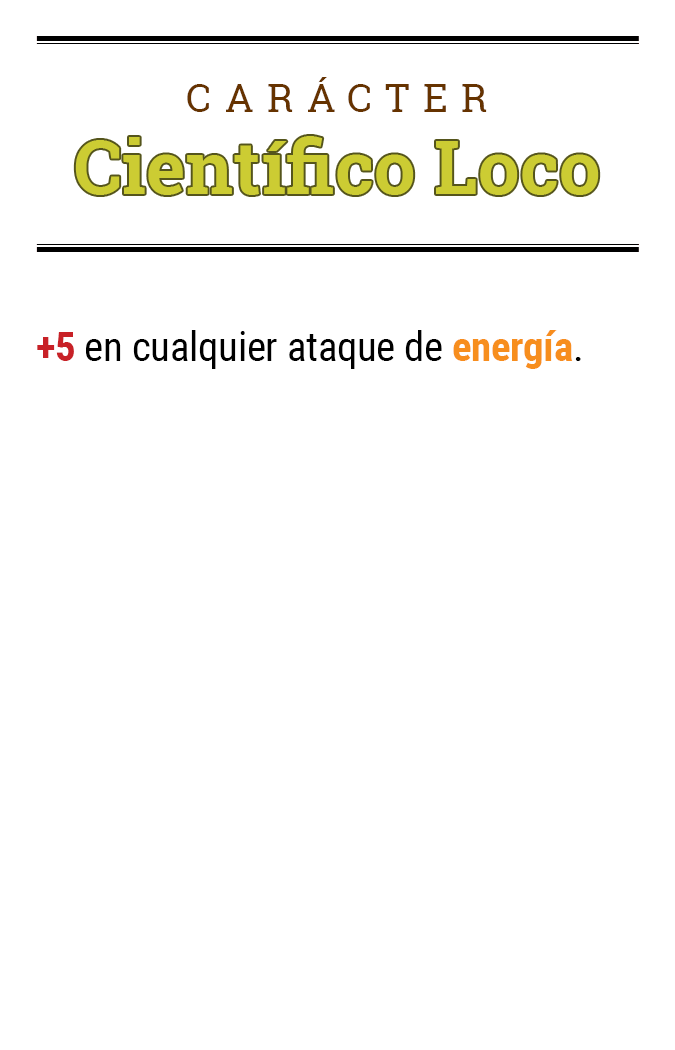
<style>
.page{position:relative;width:675px;height:1050px;background:#ffffff}
.page>*{position:absolute;margin:0}
.t1{font:39.2px "RobotoSlab-Regular";letter-spacing:0.34em;color:#663300}
.t2{font:74.5px "RobotoSlab-Bold";color:#cccc33}
.t3{font:41.1px "RobotoCondensed-Regular";letter-spacing:-0.01em;color:#000000}
.t4{font:41.1px "RobotoCondensed-Bold";letter-spacing:-0.01em;color:#c82127}
.t5{font:41.1px "RobotoCondensed-Bold";letter-spacing:-0.01em;color:#f78e1e}
</style>
<div class="page">
<p class="t1" style="left:187px;top:77px;width:300px;height:35px">CARÁCTER</p>
<p class="t2" style="left:75px;top:136px;width:524px;height:59px">Científico Loco</p>
<p class="t3" style="left:37px;top:330px;width:544px;height:39px"><span class="t4">+5</span> en cualquier ataque de <span class="t5">energía</span>.</p>
</div>
